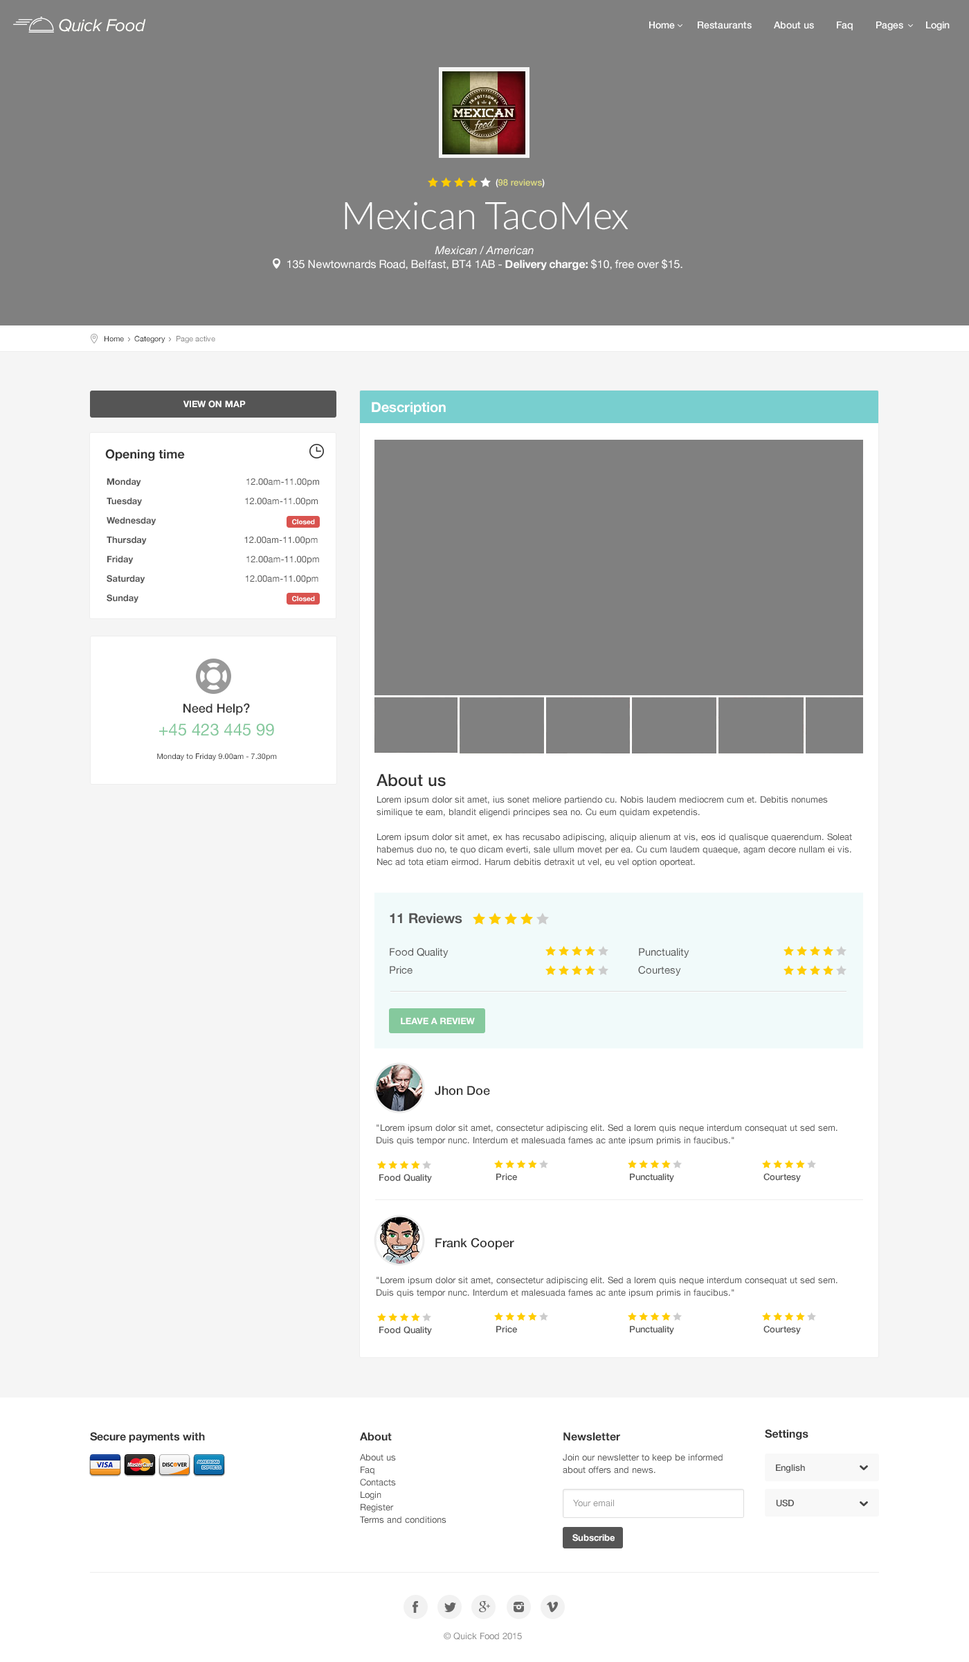
<style>
.page{position:relative;width:969px;height:1662px;background:#ffffff}
.page>*{position:absolute;margin:0}
.t1{font:18px "ProximaNova-RegularIt";letter-spacing:-0.025em;color:#fefef9}
.t2{font:9.7px "HelveticaNeue-Medium";color:#ffffff}
.t3{font:9px "HelveticaNeue-Medium";color:#dcda80}
.t4{font:9px "HelveticaNeue-Medium";color:#ffffff}
.t5{font:11.1px/13.8px "HelveticaNeue";color:#ffffff}
.t6{font:38.1px/16.6px "Lato-Light";color:#ffffff}
.t7{font:11.1px/24.9px "HelveticaNeue-Italic";color:#ffffff}
.t8{font:11.1px/13.8px "HelveticaNeue-Bold";color:#ffffff}
.t9{font:7.6px "HelveticaNeue";color:#252525}
.t10{font:7.6px "HelveticaNeue";color:#888888}
.t11{font:9px "HelveticaNeue-Bold";color:#ffffff;text-transform:uppercase}
.t12{font:13.8px "HelveticaNeue-Bold";color:#ffffff}
.t13{font:12.5px "HelveticaNeue-Bold";color:#333333}
.t14{font:9px/19.4px "HelveticaNeue-Bold";color:#555555}
.t15{font:9px/19.4px "HelveticaNeue";color:#555555}
.t16{font:6.9px "HelveticaNeue-Bold";color:#ffffff}
.t17{font:12.5px "HelveticaNeue-Medium";color:#333333}
.t18{font:16.6px "HelveticaNeue";color:#85c99d}
.t19{font:7.6px "HelveticaNeue";color:#333333}
.t20{font:9px/12.5px "HelveticaNeue";color:#555555}
.t21{font:16.6px/16.6px "HelveticaNeue-Medium";color:#333333}
.t22{font:9px/16.6px "HelveticaNeue";color:#555555}
.t23{font:13.8px "HelveticaNeue-Bold";color:#555555}
.t24{font:10.4px/18px "HelveticaNeue";color:#555555}
.t25{font:9px "HelveticaNeue-Bold";color:#ffffff}
.t26{font:9px "HelveticaNeue-Medium";color:#555555}
.t27{font:11.1px "HelveticaNeue-Bold";color:#333333}
.t28{font:9px "HelveticaNeue";color:#999999}
.t29{font:9px "HelveticaNeue";color:#8c8c8c}
</style>
<div class="page">
<p class="t1" style="left:59px;top:19px;width:87px;height:13px">Quick Food</p>
<p class="t2" style="left:649px;top:21px;width:301px;height:9px">Home        Restaurants        About us        Faq        Pages        Login</p>
<p class="t3" style="left:496px;top:179px;width:49px;height:9px"><span class="t4">(</span>98 reviews<span class="t4">)</span></p>
<p class="t5" style="left:287px;top:201px;width:396px;height:69px;text-align:center"><span class="t6">Mexican TacoMex<br></span><span class="t7">Mexican / American<br></span>135 Newtownards Road, Belfast, BT4 1AB - <span class="t8">Delivery charge: </span>$10, free over $15.</p>
<p class="t9" style="left:105px;top:336px;width:110px;height:7px">Home     Category     <span class="t10">Page active</span></p>
<p class="t11" style="left:183px;top:400px;width:63px;height:8px">VIEW ON MAP</p>
<p class="t12" style="left:372px;top:402px;width:74px;height:13px">Description</p>
<p class="t13" style="left:105px;top:449px;width:80px;height:12px">Opening time</p>
<p class="t14" style="left:107px;top:478px;width:212px;height:125px;text-align:right">Monday                             <span class="t15">12.00am-11.00pm<br></span>Tuesday                                         <span class="t15">12.00am-11.00pm<br></span>Wednesday<br>Thursday                                       <span class="t15">12.00am-11.00pm<br></span>Friday                                             <span class="t15">12.00am-11.00pm<br></span>Saturday                                        <span class="t15">12.00am-11.00pm<br></span>Sunday</p>
<p class="t16" style="left:292px;top:519px;width:23px;height:6px">Closed</p>
<p class="t16" style="left:292px;top:595px;width:23px;height:7px">Closed</p>
<p class="t17" style="left:183px;top:703px;width:67px;height:12px">Need Help?</p>
<p class="t18" style="left:159px;top:723px;width:115px;height:13px">+45 423 445 99</p>
<p class="t19" style="left:157px;top:753px;width:120px;height:8px">Monday to Friday 9.00am - 7.30pm</p>
<p class="t20" style="left:377px;top:773px;width:475px;height:94px"><span class="t21">About us<br></span><span class="t22">Lorem ipsum dolor sit amet, ius sonet meliore partiendo cu. Nobis laudem mediocrem cum et. Debitis nonumes </span>similique te eam, blandit eligendi principes sea no. Cu eum quidam expetendis.<br><br>Lorem ipsum dolor sit amet, ex has recusabo adipiscing, aliquip alienum at vis, eos id qualisque quaerendum. Soleat habemus duo no, te quo dicam everti, sale ullum movet per ea. Cu cum laudem quaeque, agam decore nullam ei vis. Nec ad tota etiam eirmod. Harum debitis detraxit ut vel, eu vel option oporteat.</p>
<p class="t23" style="left:390px;top:912px;width:72px;height:12px">11 Reviews</p>
<p class="t24" style="left:390px;top:948px;width:300px;height:27px">Food Quality         Punctuality<br>Price          Courtesy</p>
<p class="t25" style="left:401px;top:1017px;width:74px;height:7px">LEAVE A REVIEW</p>
<p class="t17" style="left:435px;top:1086px;width:55px;height:9px">Jhon Doe</p>
<p class="t20" style="left:377px;top:1124px;width:461px;height:21px">"Lorem ipsum dolor sit amet, consectetur adipiscing elit. Sed a lorem quis neque interdum consequat ut sed sem. Duis quis tempor nunc. Interdum et malesuada fames ac ante ipsum primis in faucibus."</p>
<p class="t26" style="left:379px;top:1173px;width:53px;height:9px">Food Quality</p>
<p class="t26" style="left:496px;top:1173px;width:21px;height:7px">Price</p>
<p class="t26" style="left:630px;top:1173px;width:44px;height:9px">Punctuality</p>
<p class="t26" style="left:764px;top:1173px;width:37px;height:9px">Courtesy</p>
<p class="t17" style="left:435px;top:1237px;width:79px;height:13px">Frank Cooper</p>
<p class="t20" style="left:377px;top:1276px;width:461px;height:21px">"Lorem ipsum dolor sit amet, consectetur adipiscing elit. Sed a lorem quis neque interdum consequat ut sed sem. Duis quis tempor nunc. Interdum et malesuada fames ac ante ipsum primis in faucibus."</p>
<p class="t26" style="left:379px;top:1326px;width:53px;height:9px">Food Quality</p>
<p class="t26" style="left:496px;top:1325px;width:21px;height:8px">Price</p>
<p class="t26" style="left:630px;top:1325px;width:44px;height:9px">Punctuality</p>
<p class="t26" style="left:764px;top:1325px;width:37px;height:9px">Courtesy</p>
<p class="t27" style="left:90px;top:1432px;width:115px;height:10px">Secure payments with</p>
<p class="t27" style="left:360px;top:1432px;width:32px;height:9px">About</p>
<p class="t27" style="left:564px;top:1432px;width:56px;height:9px">Newsletter</p>
<p class="t27" style="left:765px;top:1429px;width:44px;height:10px">Settings</p>
<p class="t20" style="left:360px;top:1453px;width:87px;height:70px">About us<br>Faq<br>Contacts<br>Login<br>Register<br>Terms and conditions</p>
<p class="t20" style="left:563px;top:1453px;width:160px;height:20px">Join our newsletter to keep be informed about offers and news.</p>
<p class="t26" style="left:776px;top:1464px;width:29px;height:9px">English</p>
<p class="t28" style="left:573px;top:1499px;width:41px;height:7px">Your email</p>
<p class="t26" style="left:776px;top:1499px;width:18px;height:7px">USD</p>
<p class="t25" style="left:573px;top:1533px;width:42px;height:8px">Subscribe</p>
<p class="t29" style="left:444px;top:1632px;width:78px;height:7px">© Quick Food 2015</p>
</div>
